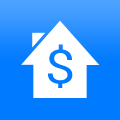
<style>
.page{position:relative;width:120px;height:120px;background:#007aff}
.page>*{position:absolute;margin:0}
.t1{font:46.8px "Roboto-Regular";color:#007aff;scale:1.15 1}
</style>
<div class="page">
<p class="t1" style="left:48px;top:44px;width:25px;height:44px">$</p>
</div>
